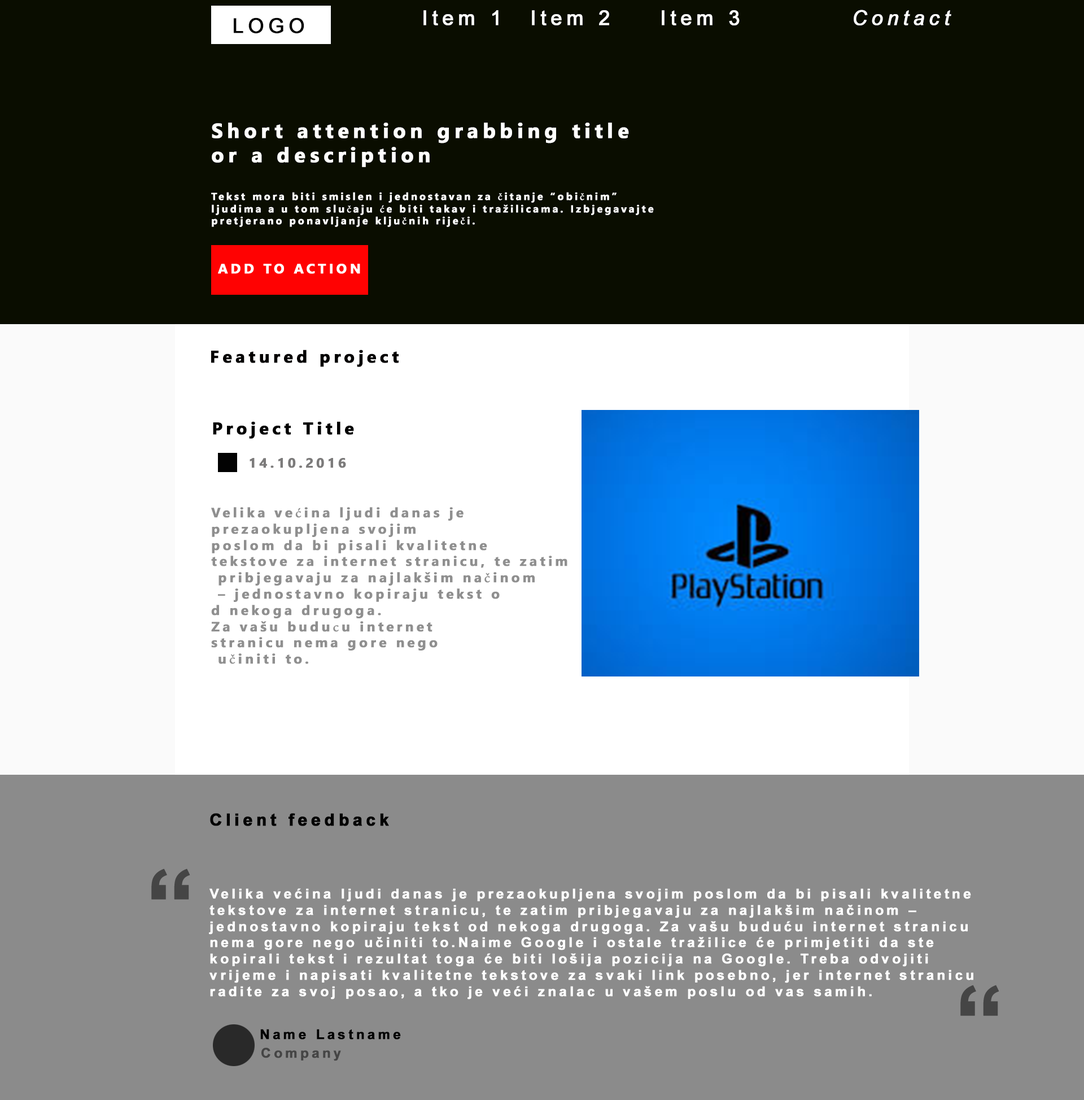
<style>
.page{position:relative;width:1084px;height:1100px;background:#8b8b8b}
.page>*{position:absolute;margin:0}
.t1{font:20.3px "ArialMT";letter-spacing:0.2em;color:#ffffff;font-weight:bold}
.t2{font:20.3px "Arial-ItalicMT";letter-spacing:0.2em;color:#ffffff;font-weight:bold}
.t3{font:20.3px "NirmalaUI-Bold";letter-spacing:0.2em;color:#ffffff;font-weight:bold}
.t4{font:10.2px "NirmalaUI-Bold";letter-spacing:0.2em;color:#ffffff;font-weight:bold}
.t5{font:10.2px "MinionPro-Regular";letter-spacing:0.2em;color:#ffffff;font-weight:bold}
.t6{font:13.6px "NirmalaUI-Bold";letter-spacing:0.2em;color:#ffffff;font-weight:bold}
.t7{font:16.9px "NirmalaUI-Bold";letter-spacing:0.2em;color:#020000;font-weight:bold}
.t8{font:16.9px "NirmalaUI-Bold";letter-spacing:0.2em;color:#020202;font-weight:bold}
.t9{font:13.6px "NirmalaUI-Bold";letter-spacing:0.2em;color:#7c7b7b;font-weight:bold}
.t10{font:13.6px "NirmalaUI-Bold";letter-spacing:0.2em;color:#8f8f8f;font-weight:bold}
.t11{font:13.6px "MinionPro-Regular";letter-spacing:0.2em;color:#8f8f8f;font-weight:bold}
.t12{font:16.9px "Arial-BoldMT";letter-spacing:0.2em;color:#020202;font-weight:bold}
.t13{font:13.6px "Arial-BoldMT";letter-spacing:0.2em;color:#ffffff;font-weight:bold}
.t14{font:13.6px "Arial-BoldMT";letter-spacing:0.2em;color:#020202;font-weight:bold}
.t15{font:13.6px "Arial-BoldMT";letter-spacing:0.2em;color:#454545;font-weight:bold}
</style>
<div class="page">
<p class="t1" style="left:423px;top:10px;width:76px;height:15px">Item 1</p>
<p class="t1" style="left:532px;top:10px;width:77px;height:15px">Item 2</p>
<p class="t1" style="left:662px;top:10px;width:78px;height:15px">Item 3</p>
<p class="t2" style="left:854px;top:10px;width:97px;height:15px">Contact</p>
<p class="t3" style="left:212px;top:123px;width:417px;height:44px">Short attention grabbing title<br>or a description</p>
<p class="t4" style="left:211px;top:192px;width:443px;height:35px">Tekst mora biti smislen i jednostavan za <span class="t5">č</span>itanje “obi<span class="t5">č</span>nim” <br>ljudima a u tom slu<span class="t5">č</span>aju <span class="t5">ć</span>e biti takav i tražilicama. Izbjegavajte <br>pretjerano ponavljanje klju<span class="t5">č</span>nih rije<span class="t5">č</span>i.</p>
<p class="t6" style="left:218px;top:264px;width:142px;height:10px">ADD TO ACTION</p>
<p class="t7" style="left:211px;top:350px;width:188px;height:17px">Featured project</p>
<p class="t8" style="left:213px;top:421px;width:141px;height:18px">Project Title</p>
<p class="t9" style="left:250px;top:458px;width:96px;height:10px">14.10.2016</p>
<p class="t10" style="left:211px;top:507px;width:356px;height:157px">Velika ve<span class="t11">ć</span>ina ljudi danas je <br>prezaokupljena svojim <br>poslom da bi pisali kvalitetne <br>tekstove za internet stranicu, te zatim<br> pribjegavaju za najlakšim na<span class="t11">č</span>inom<br> – jednostavno kopiraju tekst o<br>d nekoga drugoga. <br>Za vašu budu<span class="t11">c</span>u internet <br>stranicu nema gore nego<br> u<span class="t11">č</span>initi to.</p>
<p class="t12" style="left:210px;top:813px;width:179px;height:13px">Client feedback</p>
<p class="t13" style="left:209px;top:888px;width:764px;height:111px">Velika većina ljudi danas je prezaokupljena svojim poslom da bi pisali kvalitetne <br>tekstove za internet stranicu, te zatim pribjegavaju za najlakšim načinom – <br>jednostavno kopiraju tekst od nekoga drugoga. Za vašu buduću internet stranicu <br>nema gore nego učiniti to.Naime Google i ostale tražilice će primjetiti da ste <br>kopirali tekst i rezultat toga će biti lošija pozicija na Google. Treba odvojiti <br>vrijeme i napisati kvalitetne tekstove za svaki link posebno, jer internet stranicu <br>radite za svoj posao, a tko je veći znalac u vašem poslu od vas samih.</p>
<p class="t14" style="left:260px;top:1029px;width:141px;height:11px">Name Lastname</p>
<p class="t15" style="left:261px;top:1047px;width:80px;height:14px">Company</p>
</div>
